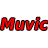
<style>
.page{position:relative;width:48px;height:48px;background:#ffffff}
.page>*{position:absolute;margin:0}
.t1{font:16px "DejaVuSansCondensed-BoldOblique";color:#ff0000}
</style>
<div class="page">
<p class="t1" style="left:0px;top:17px;width:48px;height:14px">Muvic</p>
</div>
